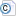
<style>
.page{position:relative;width:16px;height:16px}
.page>*{position:absolute;margin:0}
.t1{font:9px "FranklinGothic-Medium";color:#333333}
</style>
<div class="page">
<p class="t1" style="left:3px;top:5px;width:5px;height:6px">C</p>
</div>
